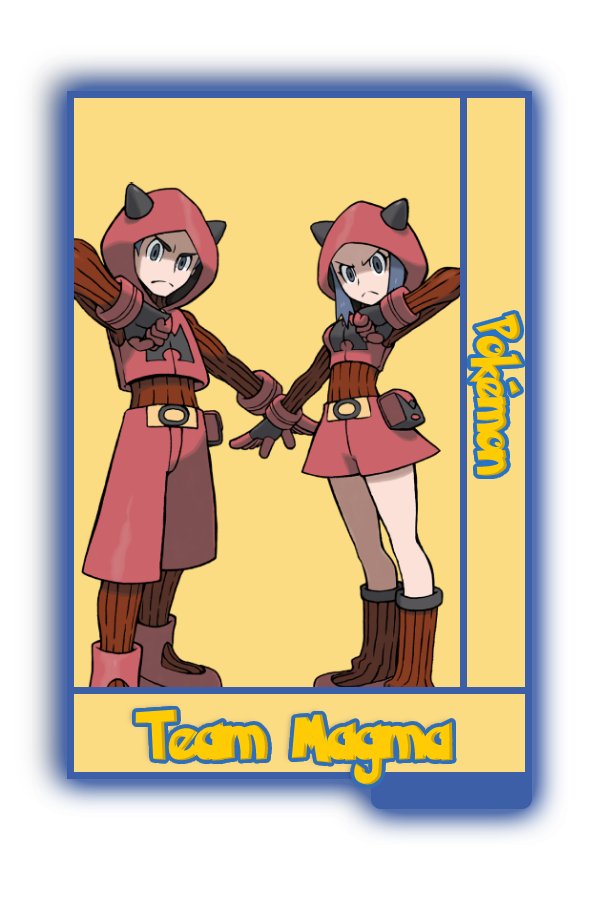
<style>
.page{position:relative;width:600px;height:900px;background:#fbdc83}
.page>*{position:absolute;margin:0}
.t1{font:48.8px "PokemonSolidNormal";color:#ffcb05;scale:0.8 1}
.t2{font:56.6px "PokemonSolidNormal";color:#ffcb05;scale:0.92 1}
</style>
<div class="page">
<p class="t1" style="left:469px;top:313px;width:54px;height:163px;rotate:90deg">Pokémon</p>
<p class="t2" style="left:135px;top:709px;width:318px;height:76px">Team Magma</p>
</div>
